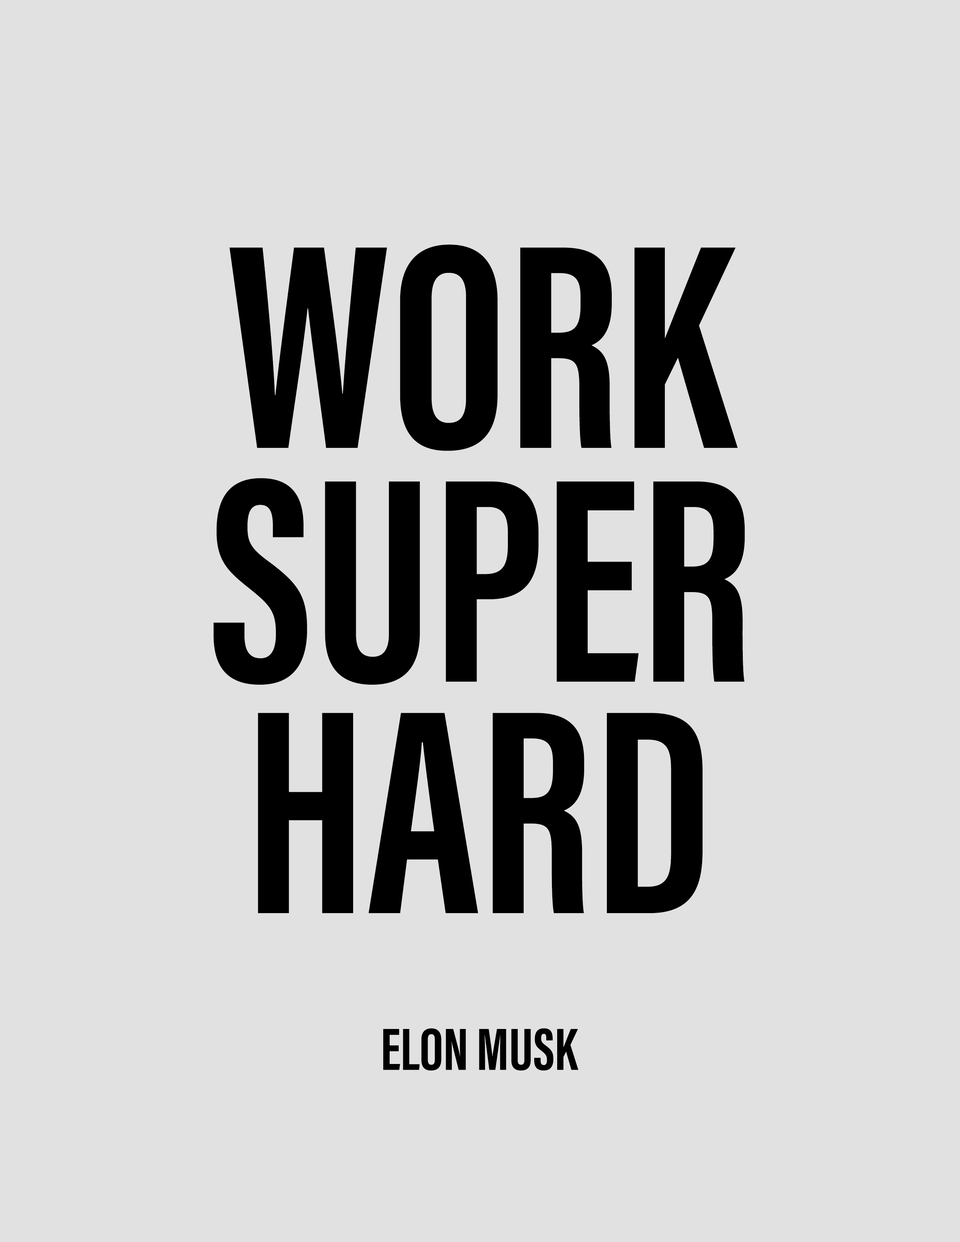
<style>
.page{position:relative;width:960px;height:1242px;background:#e2e1e1}
.page>*{position:absolute;margin:0}
.t1{font:299.7px "AcuminProExtraCond-Bold";color:#000000}
.t2{font:61.2px "AcuminProExtraCond-Bold";color:#000000}
</style>
<div class="page">
<p class="t1" style="left:229px;top:244px;width:509px;height:207px">WORK</p>
<p class="t1" style="left:213px;top:478px;width:532px;height:207px">SUPER</p>
<p class="t1" style="left:258px;top:713px;width:445px;height:201px">HARD</p>
<p class="t2" style="left:383px;top:1028px;width:196px;height:43px">ELON MUSK</p>
</div>
